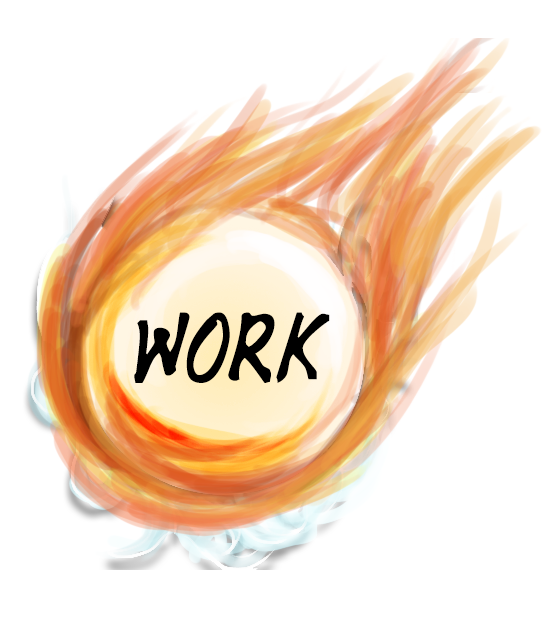
<style>
.page{position:relative;width:558px;height:625px;background:#ffffff}
.page>*{position:absolute;margin:0}
.t1{font:88px "OilBatsBasic";letter-spacing:0.01em;color:#000000}
</style>
<div class="page">
<p class="t1" style="left:134px;top:312px;width:196px;height:71px">WORK</p>
</div>
